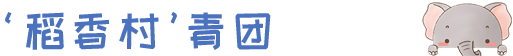
<style>
.page{position:relative;width:513px;height:56px;background:#ffffff}
.page>*{position:absolute;margin:0}
.t1{font:43.6px "HappyZcool-2016";letter-spacing:0.08em;color:#4b72be}
</style>
<div class="page">
<p class="t1" style="left:5px;top:12px;width:266px;height:38px">‘稻香村’青团</p>
</div>
